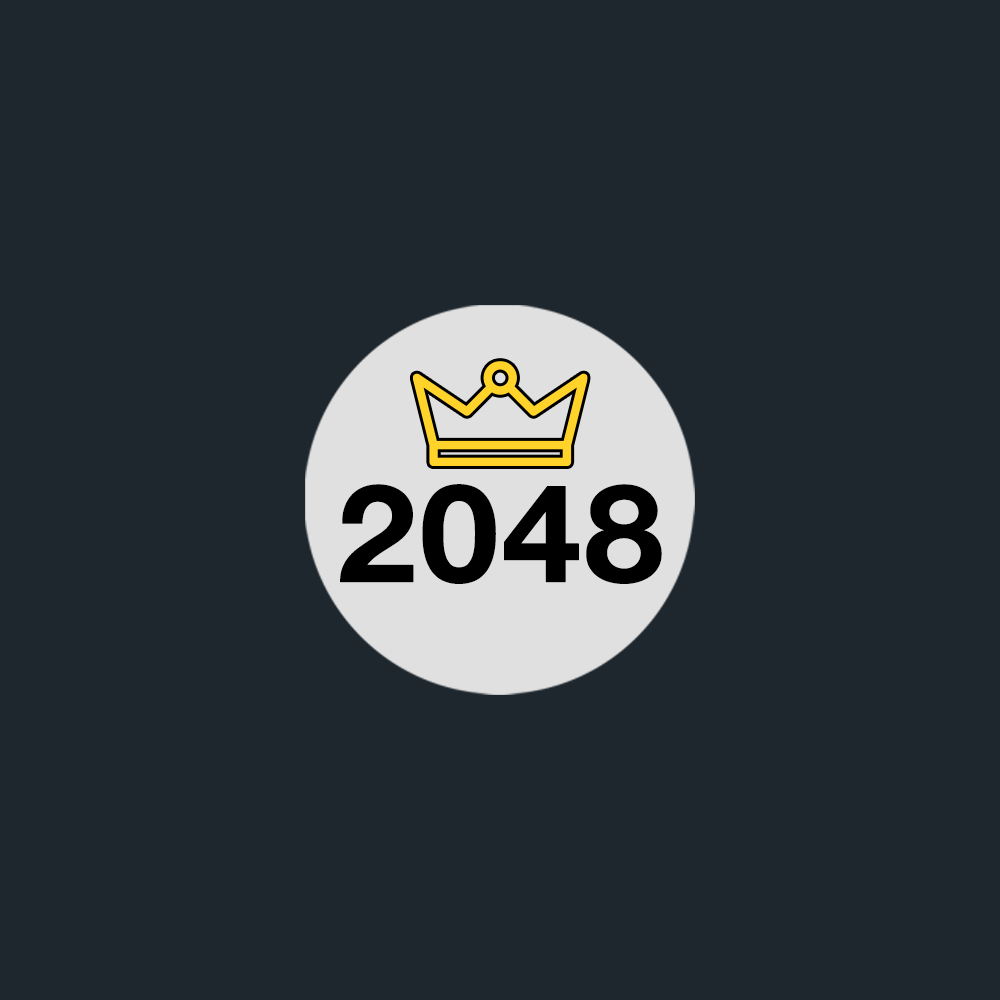
<style>
.page{position:relative;width:1000px;height:1000px;background:#1e272e}
.page>*{position:absolute;margin:0}
.t1{font:136px "HelveticaNeue-Bold";color:#000000;font-weight:bold;scale:1.04 1}
</style>
<div class="page">
<p class="t1" style="left:340px;top:484px;width:322px;height:100px">2048</p>
</div>
